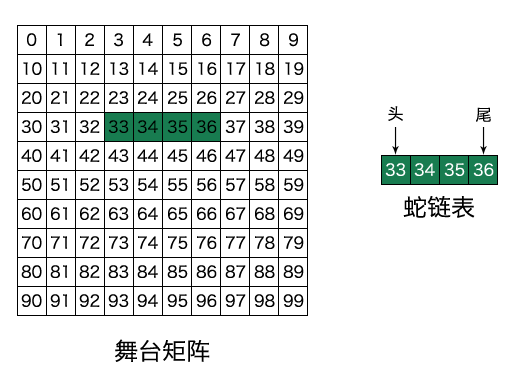
<style>
.page{position:relative;width:516px;height:391px;background:#ffffff}
.page>*{position:absolute;margin:0}
.t1{font:16px "HiraginoSansGB-W3";color:#000000}
.t2{font:16px "HiraginoSansGB-W3";color:#ffffff}
.t3{font:24px "HiraginoSansGB-W3";color:#000000}
</style>
<div class="page">
<p class="t1" style="left:27px;top:33px;width:10px;height:13px">0</p>
<p class="t1" style="left:57px;top:33px;width:5px;height:13px">１</p>
<p class="t1" style="left:85px;top:33px;width:9px;height:13px">２</p>
<p class="t1" style="left:114px;top:33px;width:9px;height:14px">３</p>
<p class="t1" style="left:142px;top:33px;width:11px;height:13px">４</p>
<p class="t1" style="left:173px;top:33px;width:9px;height:14px">５</p>
<p class="t1" style="left:202px;top:33px;width:10px;height:14px">６</p>
<p class="t1" style="left:231px;top:33px;width:9px;height:13px">７</p>
<p class="t1" style="left:260px;top:33px;width:10px;height:14px">８</p>
<p class="t1" style="left:289px;top:33px;width:9px;height:14px">９</p>
<p class="t1" style="left:23px;top:62px;width:19px;height:13px">10</p>
<p class="t1" style="left:52px;top:62px;width:15px;height:13px">11</p>
<p class="t1" style="left:81px;top:62px;width:19px;height:13px">12</p>
<p class="t1" style="left:110px;top:62px;width:19px;height:13px">13</p>
<p class="t1" style="left:139px;top:62px;width:19px;height:13px">14</p>
<p class="t1" style="left:169px;top:62px;width:19px;height:13px">15</p>
<p class="t1" style="left:198px;top:62px;width:19px;height:13px">16</p>
<p class="t1" style="left:227px;top:62px;width:19px;height:13px">17</p>
<p class="t1" style="left:256px;top:62px;width:19px;height:13px">18</p>
<p class="t1" style="left:285px;top:62px;width:19px;height:13px">19</p>
<p class="t1" style="left:22px;top:91px;width:20px;height:13px">20</p>
<p class="t1" style="left:51px;top:91px;width:16px;height:13px">21</p>
<p class="t1" style="left:80px;top:91px;width:20px;height:13px">22</p>
<p class="t1" style="left:109px;top:91px;width:20px;height:13px">23</p>
<p class="t1" style="left:137px;top:91px;width:21px;height:13px">24</p>
<p class="t1" style="left:168px;top:91px;width:20px;height:13px">25</p>
<p class="t1" style="left:197px;top:91px;width:20px;height:13px">26</p>
<p class="t1" style="left:226px;top:91px;width:20px;height:13px">27</p>
<p class="t1" style="left:255px;top:91px;width:20px;height:13px">28</p>
<p class="t1" style="left:284px;top:91px;width:20px;height:13px">29</p>
<p class="t1" style="left:388px;top:106px;width:15px;height:15px">头</p>
<p class="t1" style="left:476px;top:107px;width:15px;height:15px">尾</p>
<p class="t1" style="left:21px;top:120px;width:21px;height:13px">30</p>
<p class="t1" style="left:50px;top:120px;width:17px;height:13px">31</p>
<p class="t1" style="left:79px;top:120px;width:21px;height:13px">32</p>
<p class="t1" style="left:108px;top:120px;width:21px;height:13px">33</p>
<p class="t1" style="left:137px;top:120px;width:21px;height:13px">34</p>
<p class="t1" style="left:167px;top:120px;width:21px;height:13px">35</p>
<p class="t1" style="left:196px;top:120px;width:21px;height:13px">36</p>
<p class="t1" style="left:225px;top:120px;width:21px;height:13px">37</p>
<p class="t1" style="left:254px;top:120px;width:21px;height:13px">38</p>
<p class="t1" style="left:283px;top:120px;width:21px;height:13px">39</p>
<p class="t1" style="left:21px;top:149px;width:21px;height:13px">40</p>
<p class="t1" style="left:50px;top:149px;width:17px;height:13px">41</p>
<p class="t1" style="left:79px;top:149px;width:21px;height:13px">42</p>
<p class="t1" style="left:108px;top:149px;width:21px;height:13px">43</p>
<p class="t1" style="left:137px;top:149px;width:21px;height:13px">44</p>
<p class="t1" style="left:167px;top:149px;width:21px;height:13px">45</p>
<p class="t1" style="left:196px;top:149px;width:21px;height:13px">46</p>
<p class="t1" style="left:225px;top:149px;width:21px;height:13px">47</p>
<p class="t1" style="left:254px;top:149px;width:21px;height:13px">48</p>
<p class="t1" style="left:283px;top:149px;width:21px;height:13px">49</p>
<p class="t2" style="left:385px;top:163px;width:21px;height:13px">33</p>
<p class="t2" style="left:414px;top:163px;width:21px;height:13px">34</p>
<p class="t2" style="left:444px;top:163px;width:21px;height:13px">35</p>
<p class="t2" style="left:473px;top:163px;width:21px;height:13px">36</p>
<p class="t1" style="left:22px;top:178px;width:20px;height:13px">50</p>
<p class="t1" style="left:51px;top:178px;width:16px;height:13px">51</p>
<p class="t1" style="left:80px;top:178px;width:20px;height:13px">52</p>
<p class="t1" style="left:109px;top:178px;width:20px;height:13px">53</p>
<p class="t1" style="left:138px;top:178px;width:20px;height:13px">54</p>
<p class="t1" style="left:168px;top:178px;width:20px;height:13px">55</p>
<p class="t1" style="left:197px;top:178px;width:20px;height:13px">56</p>
<p class="t1" style="left:226px;top:178px;width:20px;height:13px">57</p>
<p class="t1" style="left:255px;top:178px;width:20px;height:13px">58</p>
<p class="t1" style="left:284px;top:178px;width:20px;height:13px">59</p>
<p class="t3" style="left:403px;top:196px;width:72px;height:22px">蛇链表</p>
<p class="t1" style="left:22px;top:207px;width:20px;height:13px">60</p>
<p class="t1" style="left:51px;top:207px;width:16px;height:13px">61</p>
<p class="t1" style="left:80px;top:207px;width:20px;height:13px">62</p>
<p class="t1" style="left:109px;top:207px;width:20px;height:13px">63</p>
<p class="t1" style="left:137px;top:207px;width:21px;height:13px">64</p>
<p class="t1" style="left:168px;top:207px;width:20px;height:13px">65</p>
<p class="t1" style="left:197px;top:207px;width:20px;height:13px">66</p>
<p class="t1" style="left:226px;top:207px;width:20px;height:13px">67</p>
<p class="t1" style="left:255px;top:207px;width:20px;height:13px">68</p>
<p class="t1" style="left:284px;top:207px;width:20px;height:13px">69</p>
<p class="t1" style="left:22px;top:236px;width:20px;height:13px">70</p>
<p class="t1" style="left:51px;top:236px;width:16px;height:13px">71</p>
<p class="t1" style="left:80px;top:236px;width:20px;height:13px">72</p>
<p class="t1" style="left:109px;top:236px;width:20px;height:13px">73</p>
<p class="t1" style="left:138px;top:236px;width:20px;height:13px">74</p>
<p class="t1" style="left:168px;top:236px;width:20px;height:13px">75</p>
<p class="t1" style="left:197px;top:236px;width:20px;height:13px">76</p>
<p class="t1" style="left:226px;top:236px;width:20px;height:13px">77</p>
<p class="t1" style="left:255px;top:236px;width:20px;height:13px">78</p>
<p class="t1" style="left:284px;top:236px;width:20px;height:13px">79</p>
<p class="t1" style="left:21px;top:265px;width:21px;height:13px">80</p>
<p class="t1" style="left:50px;top:265px;width:17px;height:13px">81</p>
<p class="t1" style="left:79px;top:265px;width:21px;height:13px">82</p>
<p class="t1" style="left:108px;top:265px;width:21px;height:13px">83</p>
<p class="t1" style="left:137px;top:265px;width:21px;height:13px">84</p>
<p class="t1" style="left:167px;top:265px;width:21px;height:13px">85</p>
<p class="t1" style="left:196px;top:265px;width:21px;height:13px">86</p>
<p class="t1" style="left:225px;top:265px;width:21px;height:13px">87</p>
<p class="t1" style="left:254px;top:265px;width:21px;height:13px">88</p>
<p class="t1" style="left:283px;top:265px;width:21px;height:13px">89</p>
<p class="t1" style="left:21px;top:294px;width:21px;height:13px">90</p>
<p class="t1" style="left:50px;top:294px;width:17px;height:13px">91</p>
<p class="t1" style="left:79px;top:294px;width:21px;height:13px">92</p>
<p class="t1" style="left:108px;top:294px;width:21px;height:13px">93</p>
<p class="t1" style="left:137px;top:294px;width:21px;height:13px">94</p>
<p class="t1" style="left:167px;top:294px;width:21px;height:13px">95</p>
<p class="t1" style="left:196px;top:294px;width:21px;height:13px">96</p>
<p class="t1" style="left:225px;top:294px;width:21px;height:13px">97</p>
<p class="t1" style="left:254px;top:294px;width:21px;height:13px">98</p>
<p class="t1" style="left:283px;top:294px;width:21px;height:13px">99</p>
<p class="t3" style="left:115px;top:339px;width:95px;height:23px">舞台矩阵</p>
</div>
